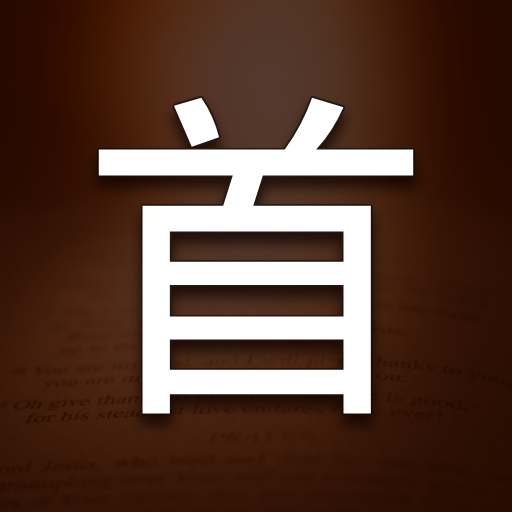
<style>
.page{position:relative;width:512px;height:512px}
.page>*{position:absolute;margin:0}
.t1{font:350px "DroidSansFallback";color:#ffffff}
</style>
<div class="page">
<p class="t1" style="left:98px;top:97px;width:316px;height:317px">首</p>
</div>
